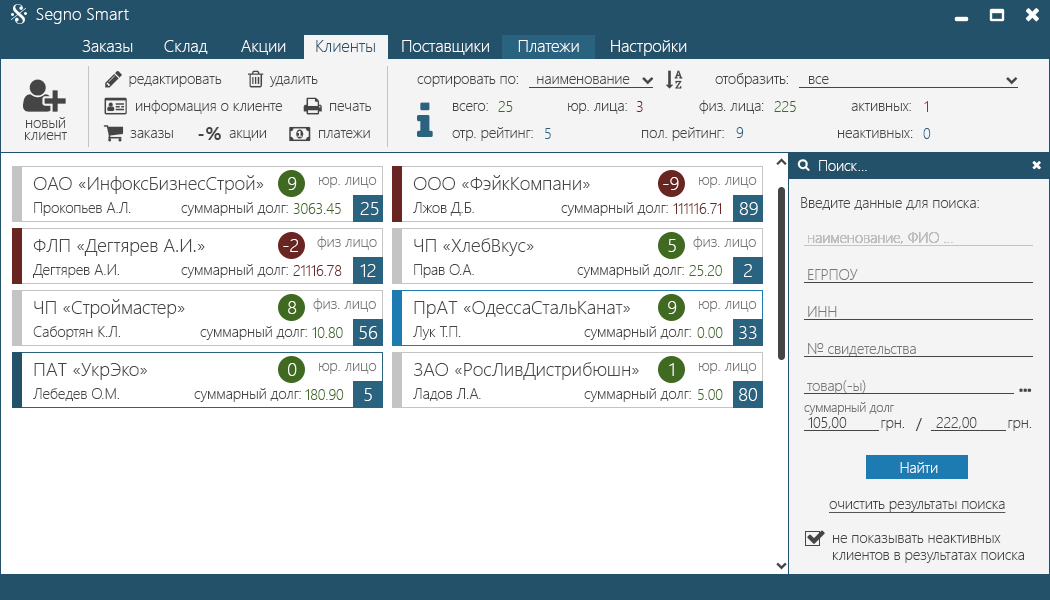
<style>
.page{position:relative;width:1050px;height:600px;background:#ffffff}
.page>*{position:absolute;margin:0}
.t1{font:17.2px "SegoeUI-Light";color:#ffffff}
.t2{font:16.7px "SegoeUI-Light";color:#ffffff}
.t3{font:16.7px "SegoeUI-Light";color:#225169}
.t4{font:14.6px "SegoeUI-Light";color:#454545}
.t5{font:14.6px "SegoeUI-Light";color:#406922}
.t6{font:14.6px "SegoeUI-Light";color:#692522}
.t7{font:14.6px "SegoeUI-Light";color:#b1241e}
.t8{font:14.6px/12.5px "SegoeUI-Light";color:#454545}
.t9{font:19.4px "SegoeUI-Bold";color:#454545}
.t10{font:14.6px "SegoeUI-Light";color:#2a6380}
.t11{font:14.6px "SegoeUI-Light";color:#ffffff}
.t12{font:18.8px "SegoeUI-Light";color:#454545}
.t13{font:18.8px "SegoeUI-Light";color:#ffffff}
.t14{font:14.6px "SegoeUI-Light";color:#787878}
.t15{font:14.6px "SegoeUI-Light";color:#c4c4c4}
.t16{font:18.8px "SegoeUI-Light"}
.t17{font:12.5px "SegoeUI-Light";color:#787878}
.t18{font:14.6px "SegoeUI";color:#454545}
.t19{font:14.6px "SegoeUI-Light";color:#454545;text-decoration:underline}
</style>
<div class="page">
<p class="t1" style="left:36px;top:8px;width:93px;height:16px">Segno Smart</p>
<p class="t2" style="left:82px;top:40px;width:51px;height:12px">Заказы</p>
<p class="t2" style="left:164px;top:40px;width:44px;height:14px">Склад</p>
<p class="t2" style="left:241px;top:40px;width:45px;height:15px">Акции</p>
<p class="t3" style="left:316px;top:40px;width:59px;height:12px">Клиенты</p>
<p class="t2" style="left:402px;top:40px;width:87px;height:15px">Поставщики</p>
<p class="t2" style="left:518px;top:40px;width:61px;height:12px">Платежи</p>
<p class="t2" style="left:611px;top:40px;width:76px;height:16px">Настройки</p>
<p class="t4" style="left:129px;top:76px;width:93px;height:11px">редактировать</p>
<p class="t4" style="left:270px;top:76px;width:48px;height:11px">удалить</p>
<p class="t4" style="left:417px;top:76px;width:101px;height:11px">сортировать по:</p>
<p class="t4" style="left:537px;top:76px;width:93px;height:8px">наименование</p>
<p class="t4" style="left:715px;top:73px;width:73px;height:14px">отобразить:</p>
<p class="t4" style="left:809px;top:76px;width:20px;height:8px">все</p>
<p class="t4" style="left:136px;top:100px;width:147px;height:14px">информация о клиенте</p>
<p class="t5" style="left:498px;top:101px;width:15px;height:11px">25</p>
<p class="t6" style="left:636px;top:101px;width:7px;height:11px">3</p>
<p class="t4" style="left:699px;top:100px;width:65px;height:14px">физ. лица:</p>
<p class="t5" style="left:774px;top:101px;width:22px;height:11px">225</p>
<p class="t7" style="left:924px;top:101px;width:4px;height:11px">1</p>
<p class="t4" style="left:330px;top:103px;width:41px;height:8px">печать</p>
<p class="t4" style="left:453px;top:103px;width:35px;height:8px">всего:</p>
<p class="t4" style="left:568px;top:103px;width:59px;height:11px">юр. лица:</p>
<p class="t4" style="left:851px;top:103px;width:60px;height:8px">активных:</p>
<p class="t8" style="left:25px;top:117px;width:42px;height:23px;text-align:center">новый<br>клиент</p>
<p class="t4" style="left:130px;top:130px;width:43px;height:8px">заказы</p>
<p class="t9" style="left:198px;top:127px;width:23px;height:13px">-%</p>
<p class="t4" style="left:229px;top:130px;width:37px;height:11px">акции</p>
<p class="t4" style="left:319px;top:130px;width:51px;height:8px">платежи</p>
<p class="t4" style="left:452px;top:127px;width:81px;height:14px">отр. рейтинг:</p>
<p class="t10" style="left:545px;top:128px;width:6px;height:11px">5</p>
<p class="t4" style="left:642px;top:127px;width:82px;height:14px">пол. рейтинг:</p>
<p class="t10" style="left:736px;top:127px;width:8px;height:11px">9</p>
<p class="t4" style="left:838px;top:130px;width:75px;height:8px">неактивных:</p>
<p class="t10" style="left:923px;top:128px;width:8px;height:11px">0</p>
<p class="t11" style="left:819px;top:160px;width:48px;height:11px">Поиск...</p>
<p class="t12" style="left:33px;top:175px;width:231px;height:19px">ОАО «ИнфоксБизнесСтрой»</p>
<p class="t13" style="left:288px;top:177px;width:9px;height:13px">9</p>
<p class="t14" style="left:319px;top:177px;width:58px;height:11px">юр. лицо</p>
<p class="t12" style="left:413px;top:175px;width:177px;height:15px">ООО «ФэйкКомпани»</p>
<p class="t13" style="left:663px;top:177px;width:16px;height:13px">-9</p>
<p class="t14" style="left:699px;top:177px;width:58px;height:11px">юр. лицо</p>
<p class="t4" style="left:801px;top:197px;width:178px;height:13px">Введите данные для поиска:</p>
<p class="t4" style="left:34px;top:202px;width:97px;height:14px">Прокопьев А.Л.</p>
<p class="t4" style="left:181px;top:202px;width:107px;height:14px">суммарный долг:</p>
<p class="t5" style="left:293px;top:203px;width:48px;height:11px">3063.45</p>
<p class="t13" style="left:360px;top:202px;width:19px;height:13px">25</p>
<p class="t4" style="left:413px;top:202px;width:61px;height:14px">Лжов Д.Б.</p>
<p class="t4" style="left:561px;top:202px;width:107px;height:14px">суммарный долг:</p>
<p class="t6" style="left:673px;top:203px;width:48px;height:11px">111116.71</p>
<p class="t13" style="left:739px;top:202px;width:19px;height:13px">89</p>
<p class="t15" style="left:808px;top:232px;width:145px;height:12px">наименование, ФИО ...</p>
<p class="t15" style="left:808px;top:232px;width:145px;height:12px">наименование, ФИО ...</p>
<p class="t12" style="left:33px;top:239px;width:172px;height:17px">ФЛП «Дегтярев А.И.»</p>
<p class="t13" style="left:283px;top:239px;width:15px;height:13px">-2</p>
<p class="t14" style="left:317px;top:236px;width:60px;height:14px">физ лицо</p>
<p class="t12" style="left:414px;top:238px;width:120px;height:18px">ЧП «ХлебВкус»</p>
<p class="t13" style="left:668px;top:239px;width:8px;height:13px">5</p>
<p class="t14" style="left:693px;top:236px;width:63px;height:14px">физ. лицо</p>
<p class="t4" style="left:33px;top:264px;width:86px;height:14px">Дегтярев А.И.</p>
<p class="t4" style="left:181px;top:264px;width:107px;height:14px">суммарный долг:</p>
<p class="t6" style="left:293px;top:265px;width:49px;height:11px">21116.78</p>
<p class="t13" style="left:360px;top:264px;width:16px;height:13px">12</p>
<p class="t4" style="left:414px;top:264px;width:60px;height:14px">Прав О.А.</p>
<p class="t4" style="left:577px;top:264px;width:107px;height:14px">суммарный долг:</p>
<p class="t5" style="left:689px;top:265px;width:33px;height:11px">25.20</p>
<p class="t13" style="left:744px;top:264px;width:8px;height:13px">2</p>
<p class="t14" style="left:808px;top:269px;width:50px;height:11px">ЕГРПОУ</p>
<p class="t12" style="left:34px;top:299px;width:151px;height:19px">ЧП «Строймастер»</p>
<p class="t13" style="left:288px;top:301px;width:9px;height:13px">8</p>
<p class="t14" style="left:313px;top:298px;width:63px;height:14px">физ. лицо</p>
<p class="t12" style="left:414px;top:301px;width:216px;height:17px">ПрАТ «ОдессаСтальКанат»</p>
<p class="t13" style="left:668px;top:301px;width:9px;height:13px">9</p>
<p class="t14" style="left:699px;top:301px;width:58px;height:11px">юр. лицо</p>
<p class="t14" style="left:808px;top:306px;width:29px;height:11px">ИНН</p>
<p class="t4" style="left:33px;top:326px;width:87px;height:14px">Сабортян К.Л.</p>
<p class="t4" style="left:200px;top:326px;width:107px;height:14px">суммарный долг:</p>
<p class="t5" style="left:312px;top:327px;width:31px;height:11px">10.80</p>
<p class="t13" style="left:359px;top:326px;width:19px;height:13px">56</p>
<p class="t4" style="left:413px;top:326px;width:48px;height:14px">Лук Т.П.</p>
<p class="t4" style="left:584px;top:326px;width:107px;height:14px">суммарный долг:</p>
<p class="t5" style="left:697px;top:327px;width:26px;height:11px">0.00</p>
<p class="t13" style="left:739px;top:326px;width:18px;height:13px">33</p>
<p class="t14" style="left:808px;top:343px;width:108px;height:13px">№ свидетельства</p>
<p class="t12" style="left:34px;top:363px;width:113px;height:17px">ПАТ «УкрЭко»</p>
<p class="t13" style="left:288px;top:363px;width:9px;height:13px">0</p>
<p class="t14" style="left:319px;top:363px;width:58px;height:11px">юр. лицо</p>
<p class="t12" style="left:414px;top:362px;width:225px;height:18px">ЗАО «РосЛивДистрибюшн»</p>
<p class="t16" style="left:669px;top:363px;width:5px;height:13px">1</p>
<p class="t14" style="left:699px;top:363px;width:58px;height:11px">юр. лицо</p>
<p class="t4" style="left:33px;top:388px;width:86px;height:13px">Лебедев О.М.</p>
<p class="t4" style="left:194px;top:388px;width:107px;height:14px">суммарный долг:</p>
<p class="t5" style="left:305px;top:389px;width:39px;height:11px">180.90</p>
<p class="t13" style="left:364px;top:388px;width:8px;height:13px">5</p>
<p class="t4" style="left:413px;top:388px;width:68px;height:13px">Ладов Л.А.</p>
<p class="t4" style="left:584px;top:388px;width:107px;height:14px">суммарный долг:</p>
<p class="t5" style="left:698px;top:389px;width:25px;height:11px">5.00</p>
<p class="t13" style="left:739px;top:388px;width:18px;height:13px">80</p>
<p class="t14" style="left:807px;top:380px;width:59px;height:14px">товар(-ы)</p>
<p class="t17" style="left:804px;top:402px;width:90px;height:13px">суммарный долг</p>
<p class="t4" style="left:808px;top:417px;width:39px;height:12px">105,00</p>
<p class="t4" style="left:881px;top:420px;width:23px;height:11px">грн.</p>
<p class="t18" style="left:915px;top:418px;width:7px;height:13px">/</p>
<p class="t4" style="left:936px;top:417px;width:41px;height:12px">222,00</p>
<p class="t4" style="left:1008px;top:420px;width:23px;height:11px">грн.</p>
<p class="t11" style="left:900px;top:462px;width:38px;height:11px">Найти</p>
<p class="t19" style="left:829px;top:501px;width:177px;height:12px">очистить результаты поиска</p>
<p class="t4" style="left:833px;top:535px;width:191px;height:28px">не показывать неактивных <br>клиентов в результатах поиска</p>
</div>
